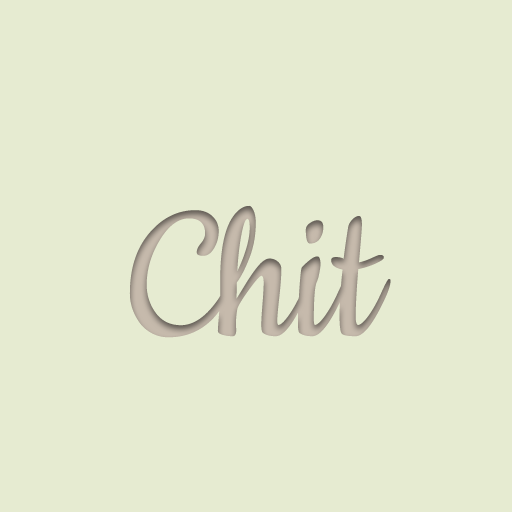
<style>
.page{position:relative;width:512px;height:512px;background:#e6ebd1}
.page>*{position:absolute;margin:0}
.t1{font:214.7px "Cookie-Regular";color:#c6baac}
</style>
<div class="page">
<p class="t1" style="left:129px;top:205px;width:262px;height:133px">Chit</p>
</div>
